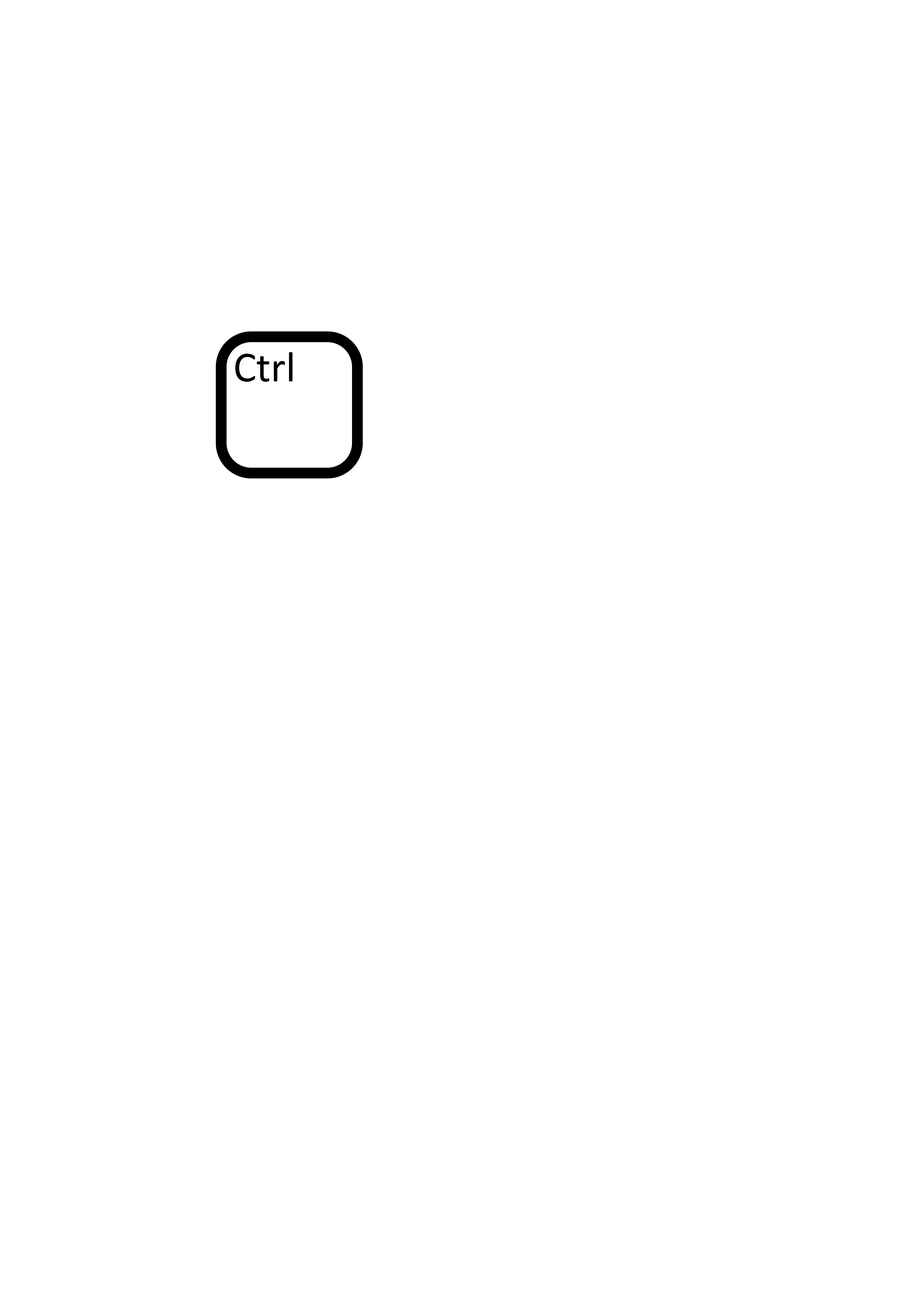
<style>
.page{position:relative;width:918px;height:1299px;background:#ffffff}
.page>*{position:absolute;margin:0}
.t1{font:43.2px "Calibri";color:#000000}
</style>
<div class="page">
<p class="t1" style="left:235px;top:352px;width:58px;height:30px">Ctrl</p>
</div>
